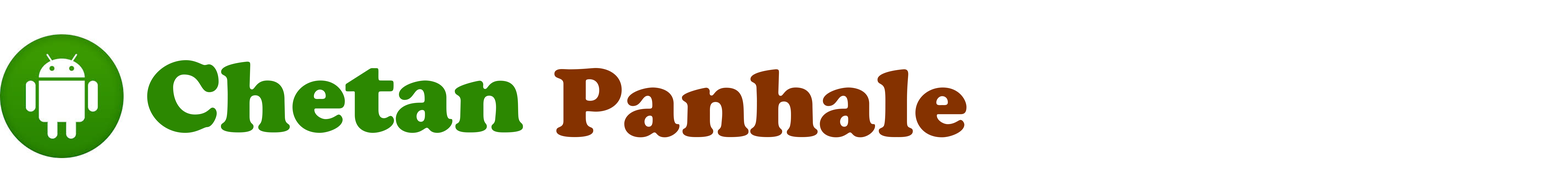
<style>
.page{position:relative;width:1568px;height:193px;background:#ffffff}
.page>*{position:absolute;margin:0}
.t1{font:99.5px "CooperBlackStd";color:#2c8801}
.t2{font:95px "CooperBlackStd";color:#853200}
</style>
<div class="page">
<p class="t1" style="left:147px;top:60px;width:376px;height:73px">Chetan</p>
<p class="t2" style="left:554px;top:68px;width:412px;height:69px">Panhale</p>
</div>
